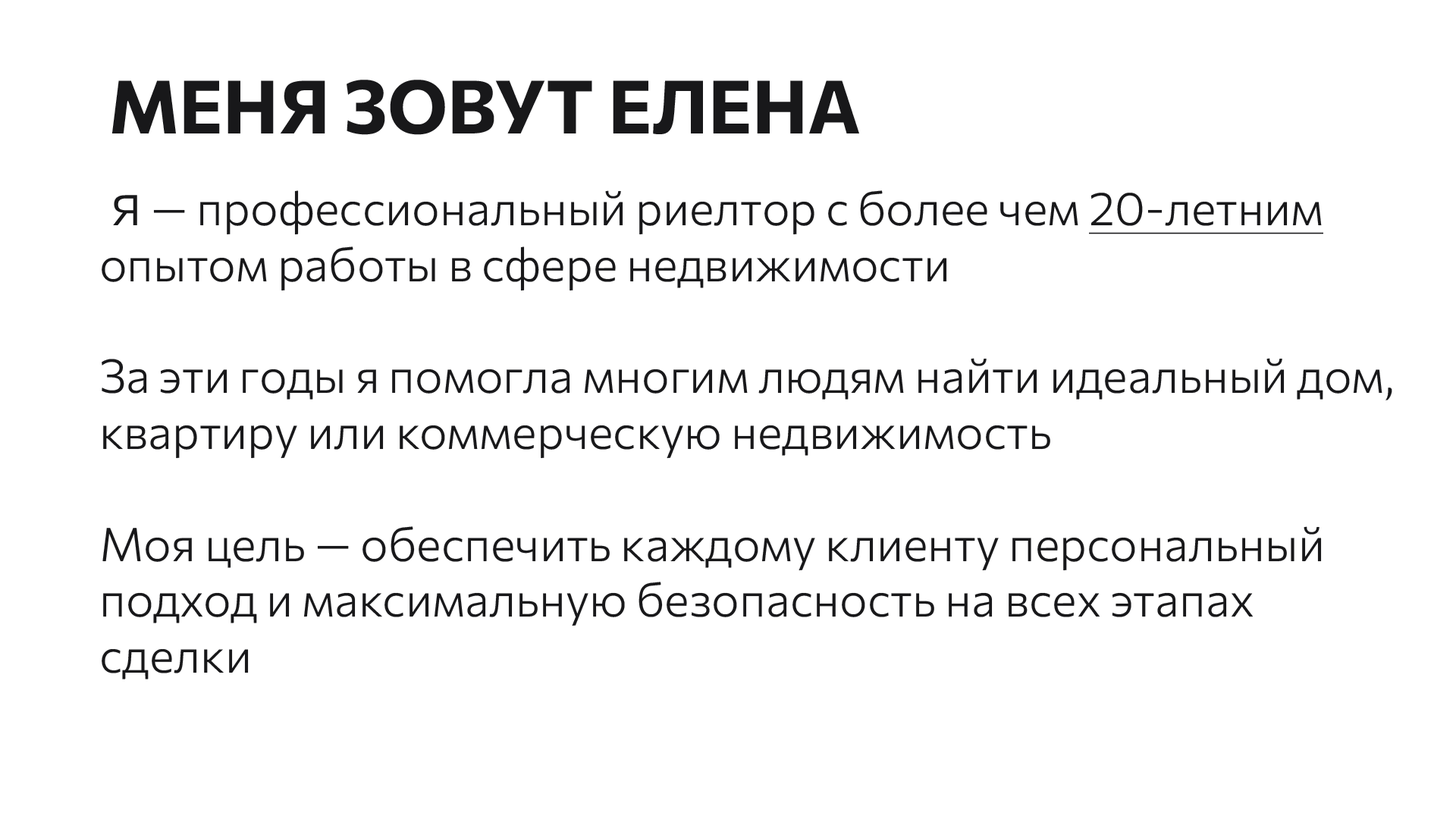
<style>
.page{position:relative;width:1456px;height:819px;background:#ffffff}
.page>*{position:absolute;margin:0}
.t1{font:73.9px "Commissioner-Bold";color:#18181a;text-transform:uppercase}
.t2{font:46.6px "Commissioner-Light";color:#18181a}
.t3{font:60.7px "Commissioner-Light";color:#18181a}
.t4{font:46.6px "Commissioner-Light";color:#18181a;text-decoration:underline}
</style>
<div class="page">
<p class="t1" style="left:111px;top:80px;width:748px;height:55px">Меня зовут ЕЛЕНА</p>
<p class="t2" style="left:102px;top:190px;width:1290px;height:489px"><span class="t3"> я</span> — профессиональный риелтор с более чем <span class="t4">20-летним</span> опытом работы в сфере недвижимости<br><br>За эти годы я помогла многим людям найти идеальный дом, квартиру или коммерческую недвижимость<br><br>Моя цель — обеспечить каждому клиенту персональный подход и максимальную безопасность на всех этапах сделки</p>
</div>
